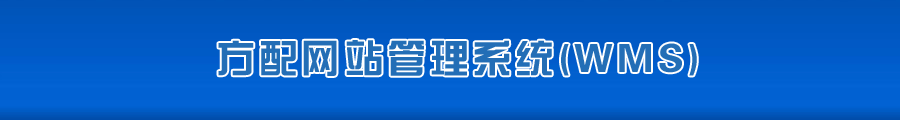
<style>
.page{position:relative;width:900px;height:120px}
.page>*{position:absolute;margin:0}
.t1{font:38.8px "FZZYJW--GB1-0";letter-spacing:0.1em;color:#236eb6}
</style>
<div class="page">
<p class="t1" style="left:218px;top:40px;width:479px;height:36px">方配网站管理系统(WMS)</p>
</div>
